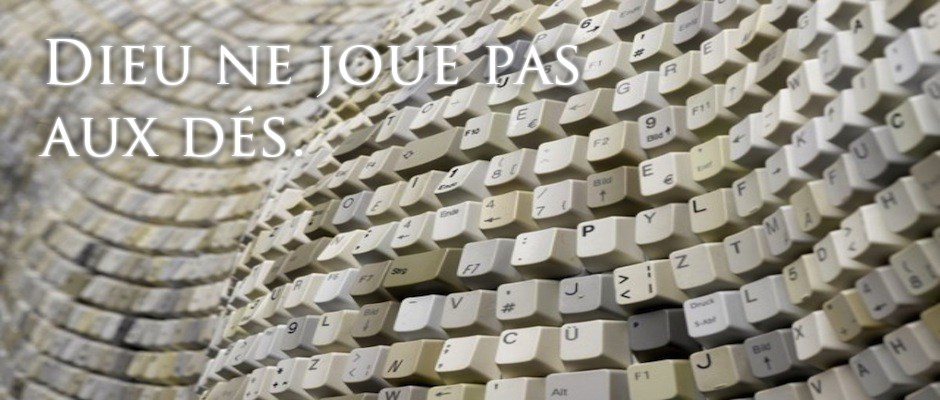
<style>
.page{position:relative;width:940px;height:400px}
.page>*{position:absolute;margin:0}
.t1{font:60px "TrajanPro-Regular";color:#ffffff}
</style>
<div class="page">
<p class="t1" style="left:38px;top:39px;width:540px;height:118px">Dieu ne joue pas aux dés.</p>
</div>
